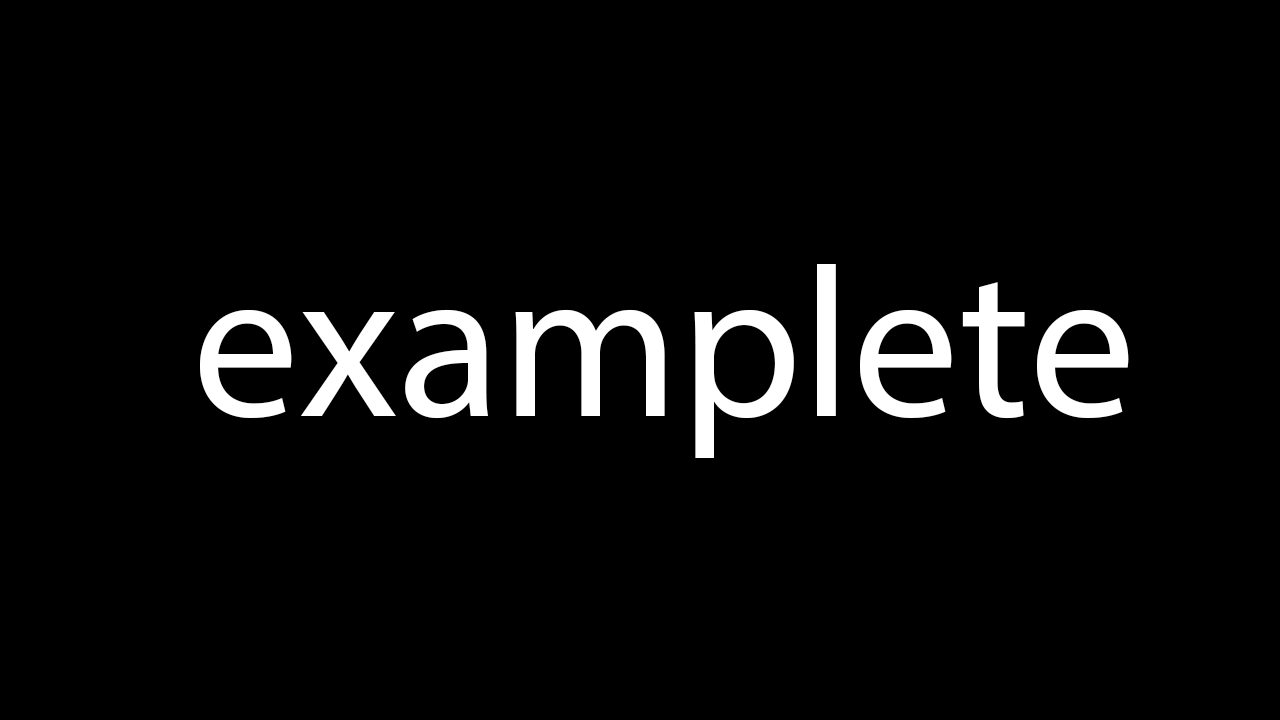
<style>
.page{position:relative;width:1280px;height:720px;background:#000000}
.page>*{position:absolute;margin:0}
.t1{font:214px "MyriadPro-Regular";color:#ffffff}
</style>
<div class="page">
<p class="t1" style="left:200px;top:264px;width:929px;height:194px">examplete</p>
</div>
